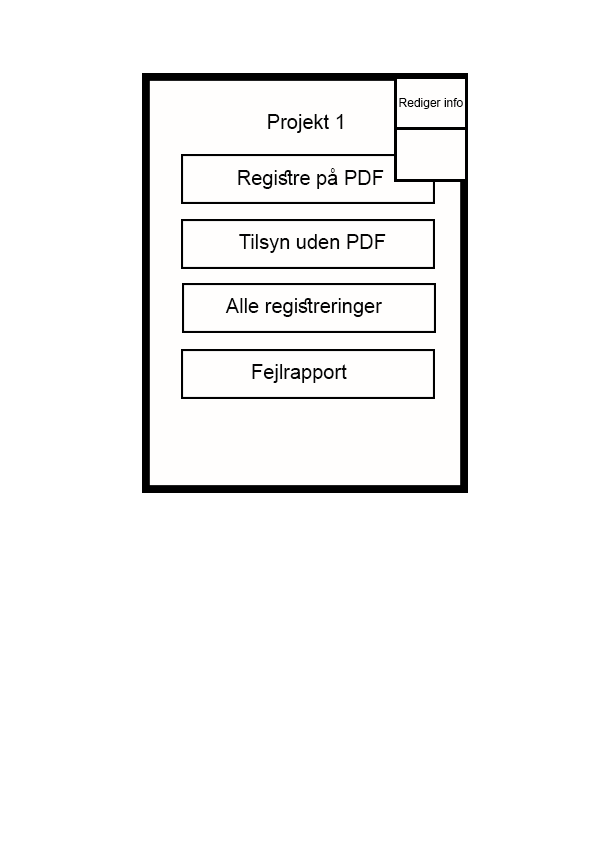
<style>
.page{position:relative;width:595px;height:842px;background:#ffffff}
.page>*{position:absolute;margin:0}
.t1{font:12px "ArialMT";color:#040404}
.t2{font:20px "ArialMT";color:#040404}
</style>
<div class="page">
<p class="t1" style="left:399px;top:98px;width:64px;height:11px">Rediger info</p>
<p class="t2" style="left:268px;top:114px;width:75px;height:19px">Projekt 1</p>
<p class="t2" style="left:238px;top:168px;width:146px;height:21px">Registre på PDF</p>
<p class="t2" style="left:239px;top:234px;width:147px;height:19px">Tilsyn uden PDF</p>
<p class="t2" style="left:225px;top:298px;width:157px;height:19px">Alle registreringer</p>
<p class="t2" style="left:252px;top:364px;width:95px;height:19px">Fejlrapport</p>
</div>
